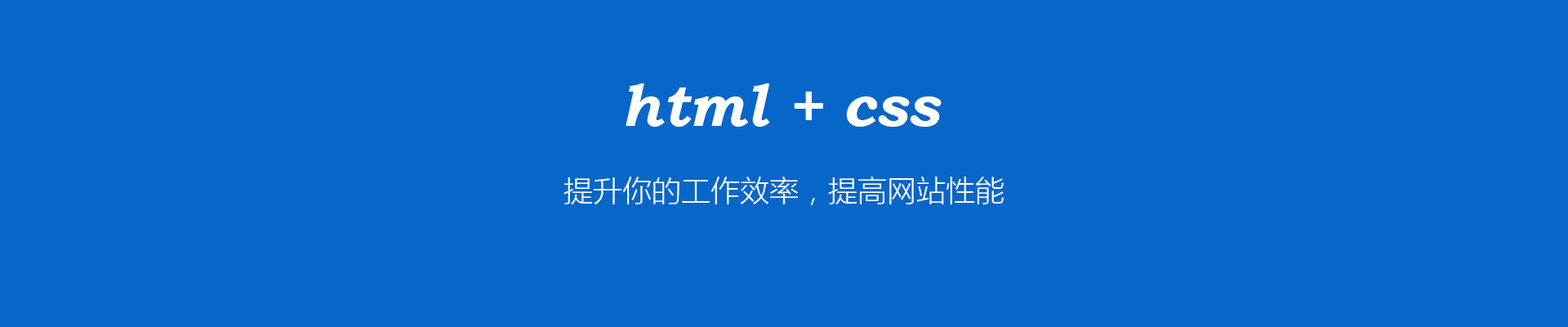
<style>
.page{position:relative;width:1568px;height:327px;background:#0667c9}
.page>*{position:absolute;margin:0}
.t1{font:58.8px "BookmanOldStyle-BoldItalic";color:#ffffff}
.t2{font:29.4px "MicrosoftYaHeiLight";color:#ffffff}
</style>
<div class="page">
<p class="t1" style="left:626px;top:83px;width:316px;height:44px">html + css</p>
<p class="t2" style="left:564px;top:176px;width:440px;height:29px">提升你的工作效率，提高网站性能</p>
</div>
